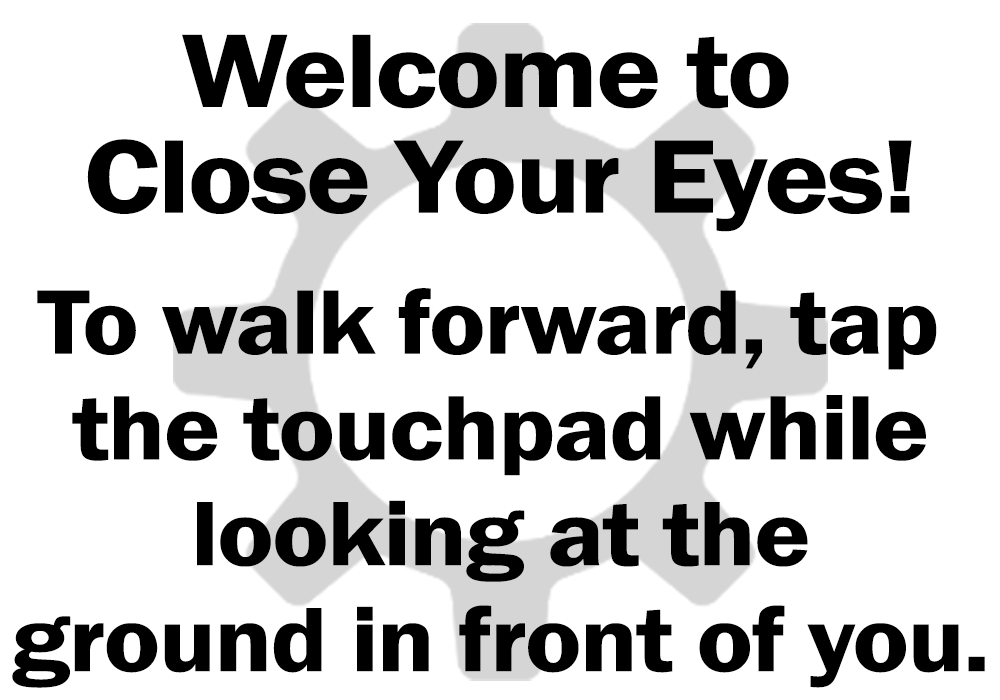
<style>
.page{position:relative;width:1000px;height:700px;background:#ffffff}
.page>*{position:absolute;margin:0}
.t1{font:94.5px/35.3px "FranklinGothic-Demi";letter-spacing:-0.02em;color:#000000;scale:1.13 1}
.t2{font:108px/35.3px "FranklinGothic-Demi";letter-spacing:-0.02em;color:#000000;scale:1.13 1}
</style>
<div class="page">
<p class="t1" style="left:12px;top:34px;width:973px;height:654px;text-align:center"><span class="t2">Welcome to <br><br><br>Close Your Eyes!<br><br><br></span><br>To walk forward, tap <br><br><br>the touchpad while<br><br><br> looking at the <br><br><br>ground in front of you.</p>
</div>
